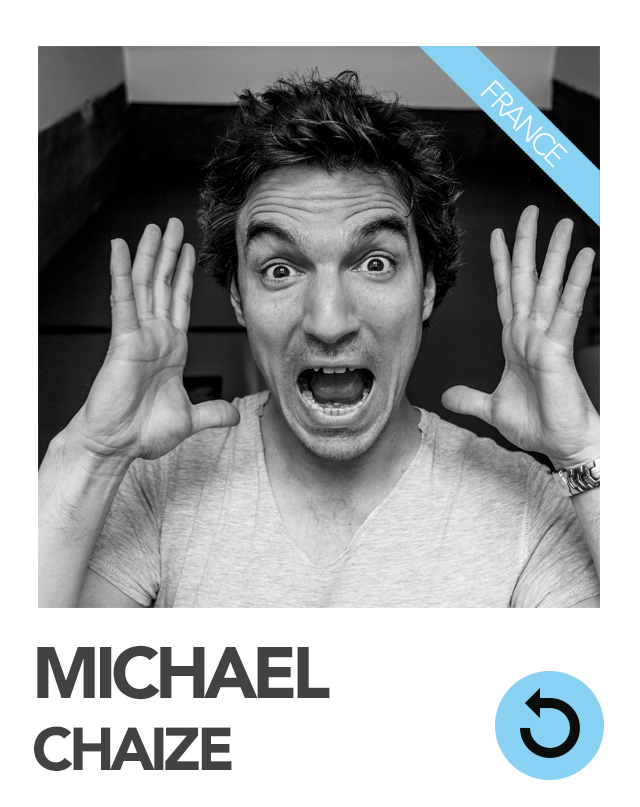
<style>
.page{position:relative;width:640px;height:807px;background:#ffffff}
.page>*{position:absolute;margin:0}
.t1{font:30.3px "AvenirLTStd-Light";letter-spacing:-0.075em;color:#f5fafd}
.t2{font:72px "AvenirLTStd-Black";letter-spacing:-0.075em;color:#424242}
.t3{font:60px "AvenirLTStd-Black";letter-spacing:-0.075em;color:#424242}
</style>
<div class="page">
<p class="t1" style="left:480px;top:80px;width:88px;height:88px;rotate:45deg">FRANCE</p>
<p class="t2" style="left:34px;top:645px;width:296px;height:126px;text-align:justify">MICHAEL<br><span class="t3">CHAIZE</span></p>
</div>
